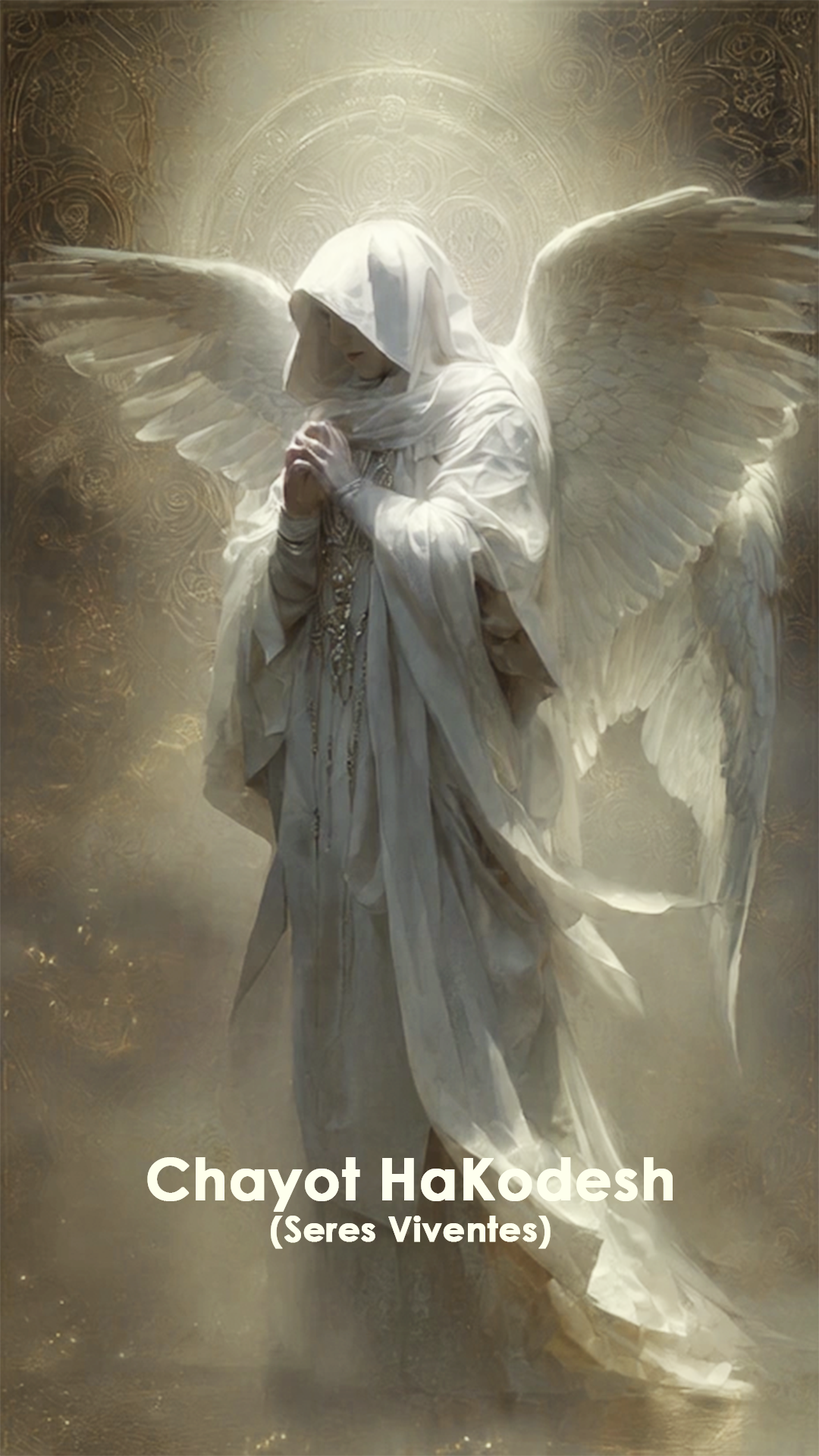
<style>
.page{position:relative;width:819px;height:1456px}
.page>*{position:absolute;margin:0}
.t1{font:34.7px "CenturyGothic-Bold";color:#ffffff;font-weight:bold}
.t2{font:57.8px "CenturyGothic-Bold";color:#ffffff;font-weight:bold}
</style>
<div class="page">
<p class="t1" style="left:147px;top:1157px;width:526px;height:92px;text-align:center"><span class="t2">Chayot HaKodesh<br></span>(Seres Viventes)</p>
</div>
